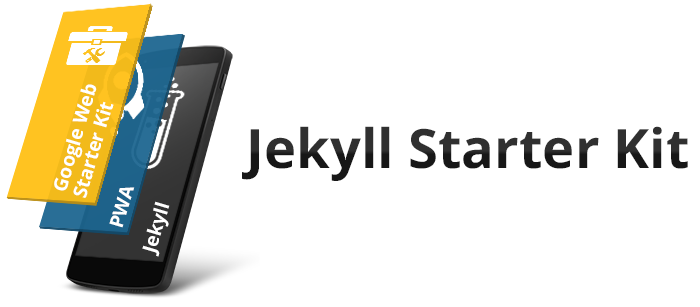
<style>
.page{position:relative;width:700px;height:307px;background:#ffffff}
.page>*{position:absolute;margin:0}
.t1{font:19.1px/20.8px "OpenSansHebrew-Bold";color:#ffffff}
.t2{font:54.3px "OpenSansHebrew-Bold";color:#2d2d2d}
.t3{font:54.3px "MyriadPro-Regular";color:#2d2d2d}
.t4{font:19.1px "OpenSansHebrew-Bold";color:#ffffff}
</style>
<div class="page">
<p class="t1" style="left:54px;top:84px;width:60px;height:114px;rotate:-74deg">Google Web<br>Starter Kit</p>
<p class="t2" style="left:242px;top:126px;width:446px;height:55px">Jekyll Starter Kit<span class="t3">‏</span></p>
<p class="t4" style="left:109px;top:187px;width:26px;height:41px;rotate:-74deg">PWA</p>
<p class="t4" style="left:142px;top:201px;width:28px;height:56px;rotate:-74deg">Jekyll</p>
</div>
